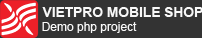
<style>
.page{position:relative;width:202px;height:38px;background:#333333}
.page>*{position:absolute;margin:0}
.t1{font:14px "Arial-BoldMT";letter-spacing:-0.01em;color:#f8f8f8}
.t2{font:12px "ArialMT";color:#f8f8f8}
</style>
<div class="page">
<p class="t1" style="left:42px;top:7px;width:161px;height:10px">VIETPRO MOBILE SHOP</p>
<p class="t2" style="left:42px;top:22px;width:95px;height:11px">Demo php project</p>
</div>
